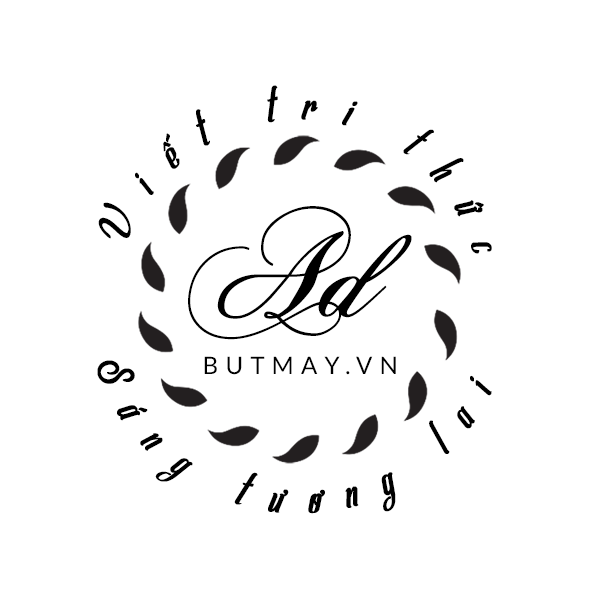
<style>
.page{position:relative;width:600px;height:600px;background:#ffffff}
.page>*{position:absolute;margin:0}
.t1{font:36px "LP-Allema";letter-spacing:0.7em;color:#000000;font-weight:bold}
.t2{font:126.3px "ChopinScript";color:#000000;font-weight:bold;font-style:italic}
.t3{font:24px "Lato-Regular";letter-spacing:0.3em;color:#000000}
</style>
<div class="page">
<p class="t1" style="left:98px;top:85px;width:394px;height:169px">Viết tri thức</p>
<p class="t2" style="left:188px;top:206px;width:224px;height:134px">Ad</p>
<p class="t1" style="left:97px;top:360px;width:395px;height:154px">Sáng tương lai</p>
<p class="t3" style="left:204px;top:356px;width:192px;height:19px">BUTMAY.VN</p>
</div>
